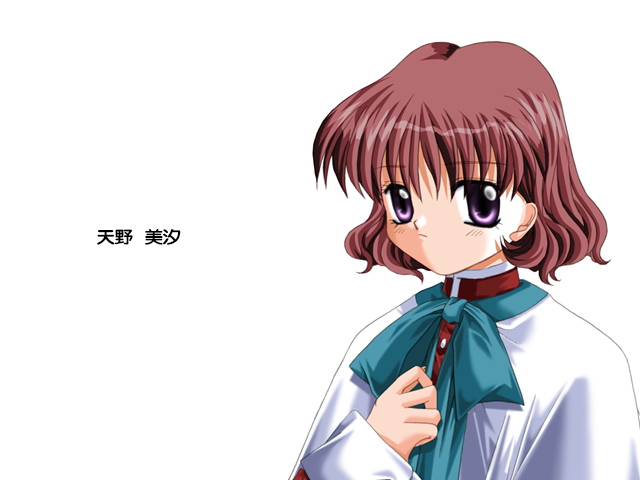
<style>
.page{position:relative;width:640px;height:480px;background:#ffffff}
.page>*{position:absolute;margin:0}
.t1{font:17px "FZY4K--GBK1-0";letter-spacing:-0.08em;color:#000000;scale:1.14 1}
</style>
<div class="page">
<p class="t1" style="left:97px;top:229px;width:84px;height:16px">天野   美汐</p>
</div>
